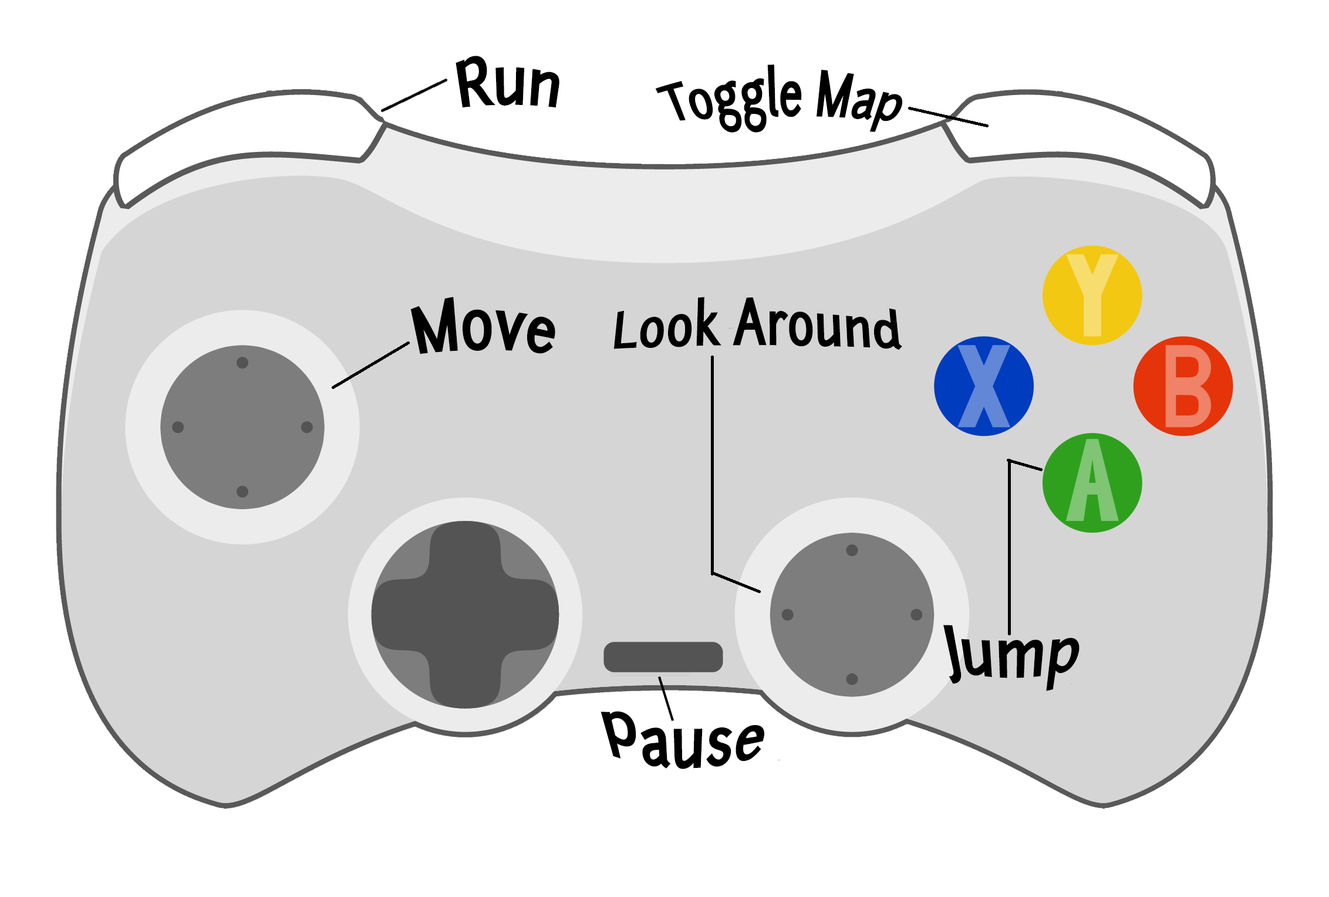
<style>
.page{position:relative;width:1329px;height:897px;background:#ffffff}
.page>*{position:absolute;margin:0}
.t1{font:56.3px "Junction-Bold";color:#000000}
.t2{font:43px "Junction-Bold";color:#000000}
.t3{font:47px "Junction-Bold";color:#000000}
</style>
<div class="page">
<p class="t1" style="left:455px;top:56px;width:104px;height:52px">Run</p>
<p class="t2" style="left:655px;top:65px;width:248px;height:68px">Toggle Map</p>
<p class="t1" style="left:410px;top:297px;width:145px;height:57px">Move</p>
<p class="t3" style="left:613px;top:297px;width:289px;height:53px">Look Around</p>
<p class="t1" style="left:943px;top:625px;width:136px;height:66px">Jump</p>
<p class="t1" style="left:600px;top:711px;width:164px;height:58px">Pause</p>
</div>
